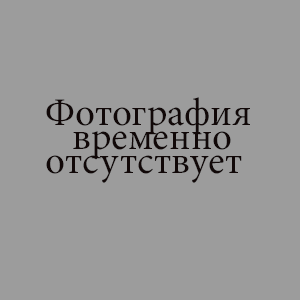
<style>
.page{position:relative;width:300px;height:300px;background:#9c9c9c}
.page>*{position:absolute;margin:0}
.t1{font:39px/24px "MinionPro-Regular";color:#110808}
</style>
<div class="page">
<p class="t1" style="left:46px;top:97px;width:204px;height:86px">Фотография <br>   временно <br>отсутствует</p>
</div>
